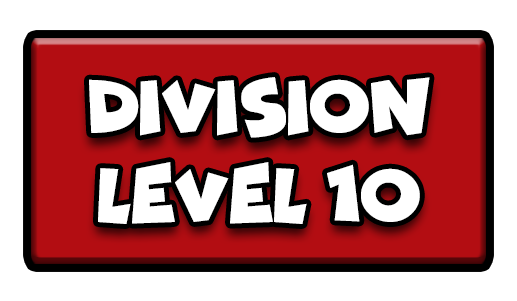
<style>
.page{position:relative;width:517px;height:301px;background:#ffffff}
.page>*{position:absolute;margin:0}
.t1{font:77.7px "Funhouse";color:#ffffff;scale:0.95 1}
</style>
<div class="page">
<p class="t1" style="left:89px;top:77px;width:341px;height:61px">DIVISION</p>
<p class="t1" style="left:98px;top:162px;width:322px;height:62px">LEVEL 10</p>
</div>
